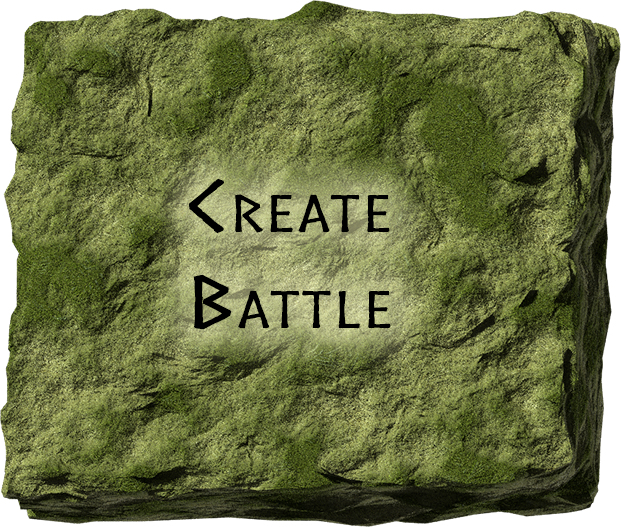
<style>
.page{position:relative;width:621px;height:527px}
.page>*{position:absolute;margin:0}
.t1{font:68px "Norse";color:#000000;font-variant:small-caps;font-weight:bold;scale:1.76 1}
</style>
<div class="page">
<p class="t1" style="left:188px;top:178px;width:203px;height:152px;text-align:center">Create<br>Battle</p>
</div>
